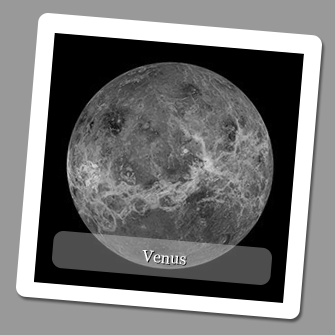
<style>
.page{position:relative;width:335px;height:335px;background:#999999}
.page>*{position:absolute;margin:0}
.t1{font:16px "Georgia";color:#ffffff}
</style>
<div class="page">
<p class="t1" style="left:142px;top:250px;width:44px;height:15px;rotate:5deg">Venus</p>
</div>
